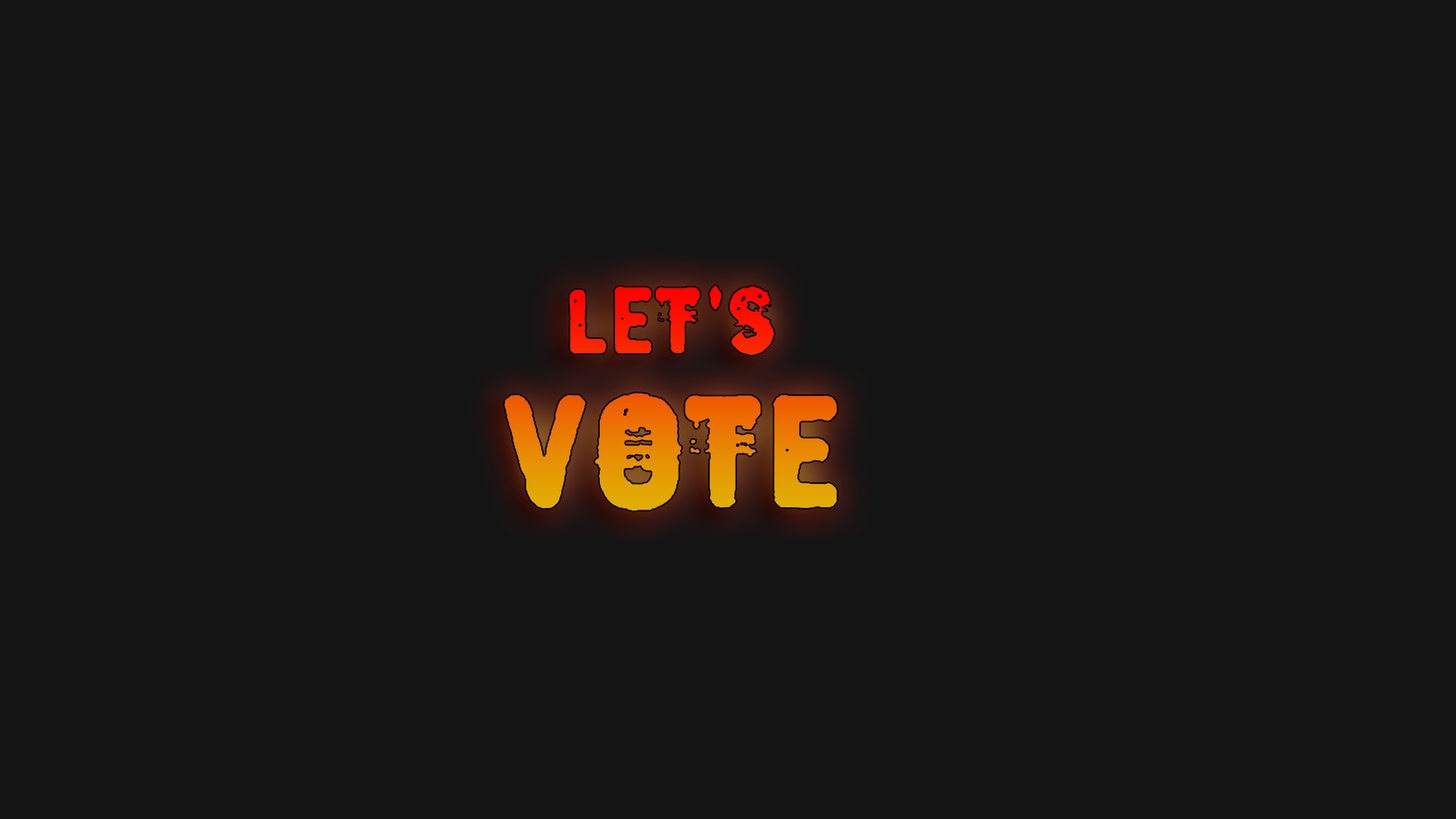
<style>
.page{position:relative;width:1456px;height:819px;background:#141414}
.page>*{position:absolute;margin:0}
.t1{font:113.7px/153.1px "CodeZlyhania-Regular";font-weight:bold}
.t2{font:113.7px "CodeZlyhania-Regular";font-weight:bold}
.t3{font:189.6px/153.1px "CodeZlyhania-Regular";font-weight:bold}
</style>
<div class="page">
<p class="t1" style="left:503px;top:284px;width:336px;height:229px"><span class="t2">  </span>Let's<br><span class="t3">vote</span></p>
</div>
